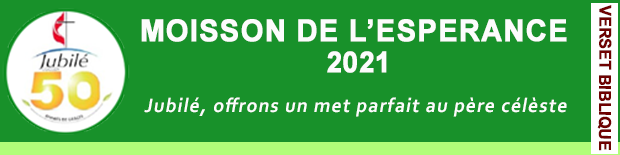
<style>
.page{position:relative;width:620px;height:155px;background:#18912a}
.page>*{position:absolute;margin:0}
.t1{font:16.5px "Arial-BoldMT";letter-spacing:-0.02em;color:#6e0101;text-transform:uppercase;font-weight:bold;scale:0.96 1}
.t2{font:30.3px "Arial-BoldMT";letter-spacing:0.02em;color:#fcfcfc;text-transform:uppercase;font-weight:bold;scale:0.96 1}
.t3{font:29.1px "Arial-BoldMT";color:#fcfcfc;text-transform:uppercase;font-weight:bold;scale:0.96 1}
.t4{font:20.3px "Corbel-Bold";letter-spacing:0.06em;color:#fcfcfc;font-style:italic;scale:0.96 1}
</style>
<div class="page">
<p class="t1" style="left:597px;top:5px;width:15px;height:146px;rotate:90deg">Verset Biblique</p>
<p class="t2" style="left:141px;top:19px;width:426px;height:23px">moisson de l’esperance</p>
<p class="t3" style="left:327px;top:51px;width:60px;height:22px">2021</p>
<p class="t4" style="left:144px;top:97px;width:423px;height:20px">Jubilé, offrons un met parfait au père célèste</p>
</div>
